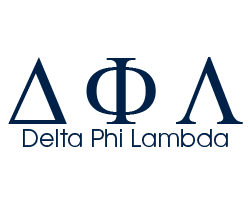
<style>
.page{position:relative;width:250px;height:200px;background:#ffffff}
.page>*{position:absolute;margin:0}
.t1{font:24px "TeXGyreAdventor-Regular";color:#002147}
</style>
<div class="page">
<p class="t1" style="left:23px;top:129px;width:205px;height:18px">Delta Phi Lambda</p>
</div>
